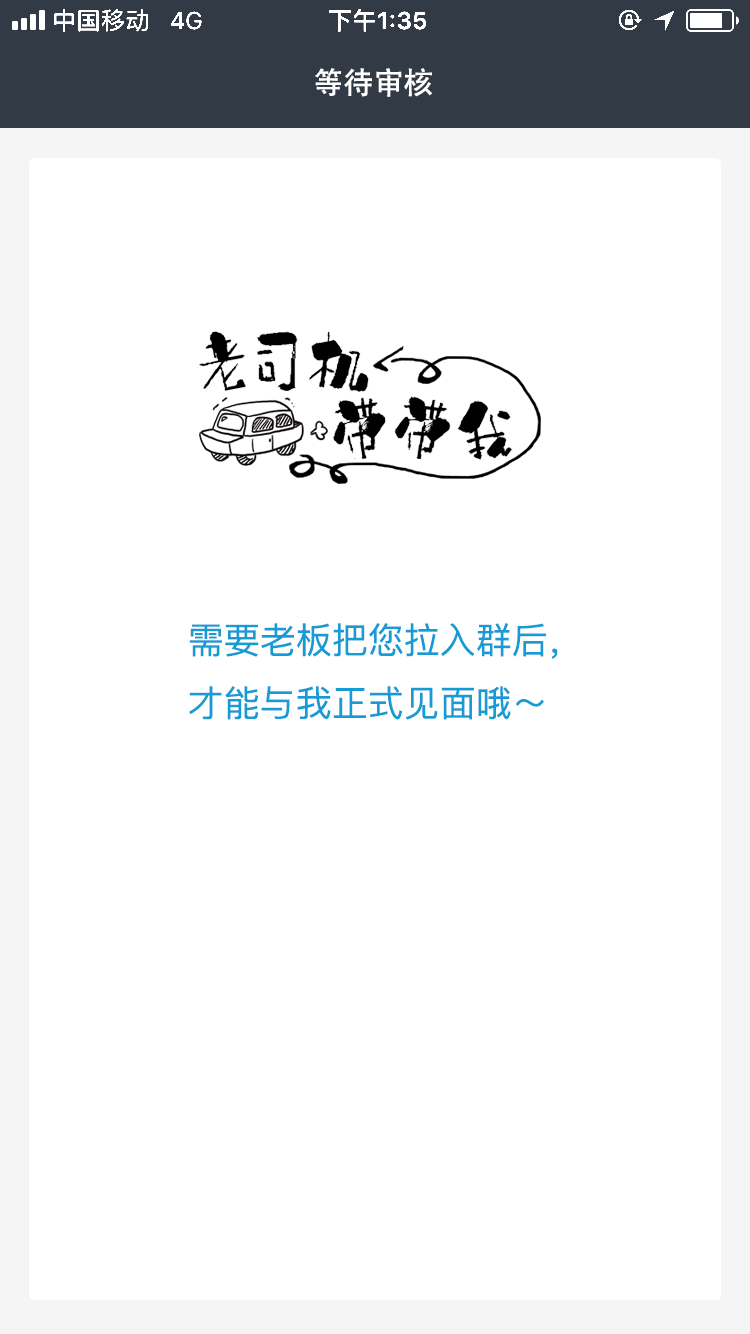
<style>
.page{position:relative;width:750px;height:1334px;background:#ffffff}
.page>*{position:absolute;margin:0}
.t1{font:30px "AdobeHeitiStd-Regular";color:#ffffff}
.t2{font:36px "PingFangSC-Regular";color:#169bd5}
</style>
<div class="page">
<p class="t1" style="left:315px;top:68px;width:117px;height:29px">等待审核</p>
<p class="t2" style="left:189px;top:623px;width:369px;height:97px">需要老板把您拉入群后，<br>才能与我正式见面哦～</p>
</div>
